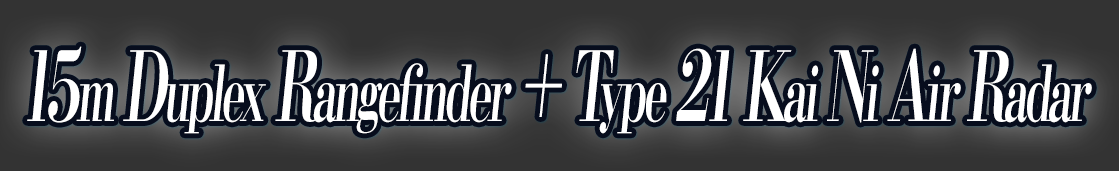
<style>
.page{position:relative;width:1119px;height:171px;background:#333333}
.page>*{position:absolute;margin:0}
.t1{font:76.8px "KochoStd-Heavy";letter-spacing:-0.08em;color:#ffffff;font-style:italic;scale:0.57 1}
.t2{font:96px "KochoStd-Heavy";letter-spacing:-0.08em;color:#ffffff;font-style:italic;scale:0.57 1}
</style>
<div class="page">
<p class="t1" style="left:27px;top:46px;width:1065px;height:88px"><span class="t2">15</span>m <span class="t2">D</span>uplex<span class="t2"> R</span>angefinder<span class="t2"> + T</span>ype <span class="t2">21 K</span>ai <span class="t2">N</span>i <span class="t2">A</span>ir <span class="t2">R</span>adar</p>
</div>
